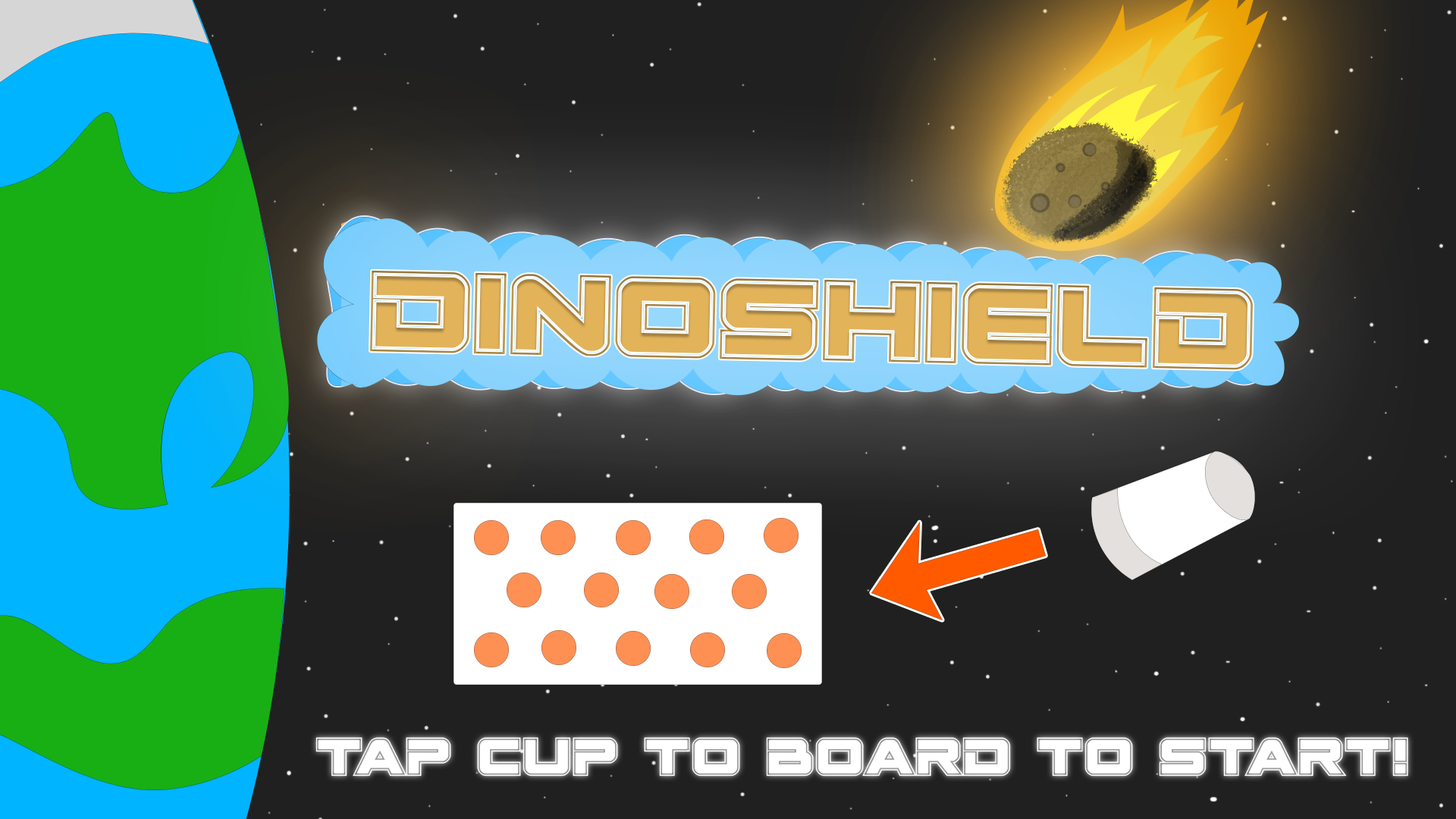
<style>
.page{position:relative;width:1456px;height:819px;background:#202020}
.page>*{position:absolute;margin:0}
.t1{font:160.3px "SpaceRangerAcademy";color:#e2b359}
.t2{font:75.8px "SpaceRangerAcademy";color:#ffffff}
</style>
<div class="page">
<p class="t1" style="left:370px;top:270px;width:883px;height:100px;rotate:1deg">Dinoshield</p>
<p class="t2" style="left:315px;top:737px;width:1093px;height:40px">Tap Cup to Board to start!</p>
</div>
